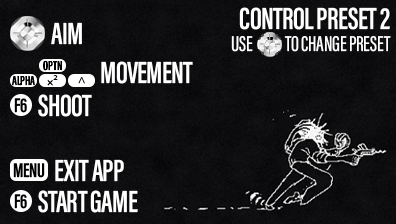
<style>
.page{position:relative;width:396px;height:224px}
.page>*{position:absolute;margin:0}
.t1{font:22px/22px "AcuminConcept-ExtraCondensedMedium";letter-spacing:-0.01em;color:#ffffff}
.t2{font:31.5px/30px "AcuminConcept-ExtraCondensedSemibold";letter-spacing:-0.02em;color:#ffffff}
.t3{font:31.5px "AcuminConcept-ExtraCondensedSemibold";letter-spacing:-0.02em;color:#ffffff}
.t4{font:13.3px "AcuminConcept-ExtraCondensedSemibold";color:#000000}
.t5{font:13.3px "AcuminConcept-ExtraCondensedSemibold";letter-spacing:-0.02em;color:#000000}
.t6{font:13.3px "MyriadPro-Regular";letter-spacing:-0.02em;color:#000000}
.t7{font:13.3px "MyriadPro-Regular";letter-spacing:-0.02em}
.t8{font:20.3px "AcuminConcept-ExtraCondensedSemibold";letter-spacing:-0.02em;color:#000000}
</style>
<div class="page">
<p class="t1" style="left:231px;top:7px;width:160px;height:45px;text-align:right"><span class="t2">CONTROL PRESET 2<br></span>USE            TO CHANGE PRESET</p>
<p class="t3" style="left:51px;top:22px;width:31px;height:23px">AIM</p>
<p class="t4" style="left:43px;top:60px;width:19px;height:11px">OPTN</p>
<p class="t3" style="left:101px;top:61px;width:92px;height:23px">MOVEMENT</p>
<p class="t5" style="left:12px;top:76px;width:23px;height:10px">ALPHA</p>
<p class="t5" style="left:47px;top:75px;width:11px;height:11px">×<span class="t6">²</span></p>
<p class="t7" style="left:78px;top:77px;width:7px;height:7px">^</p>
<p class="t8" style="left:14px;top:98px;width:13px;height:15px">F6</p>
<p class="t3" style="left:38px;top:94px;width:54px;height:23px">SHOOT</p>
<p class="t3" style="left:55px;top:159px;width:69px;height:23px">EXIT APP</p>
<p class="t8" style="left:13px;top:163px;width:32px;height:15px">MENU</p>
<p class="t8" style="left:14px;top:194px;width:13px;height:15px">F6</p>
<p class="t3" style="left:38px;top:190px;width:100px;height:23px">START GAME</p>
</div>
